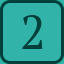
<style>
.page{position:relative;width:64px;height:64px;background:#31b3aa}
.page>*{position:absolute;margin:0}
.t1{font:48px "PTSerif-Regular";color:#00403b}
</style>
<div class="page">
<p class="t1" style="left:22px;top:15px;width:21px;height:34px">2</p>
</div>
